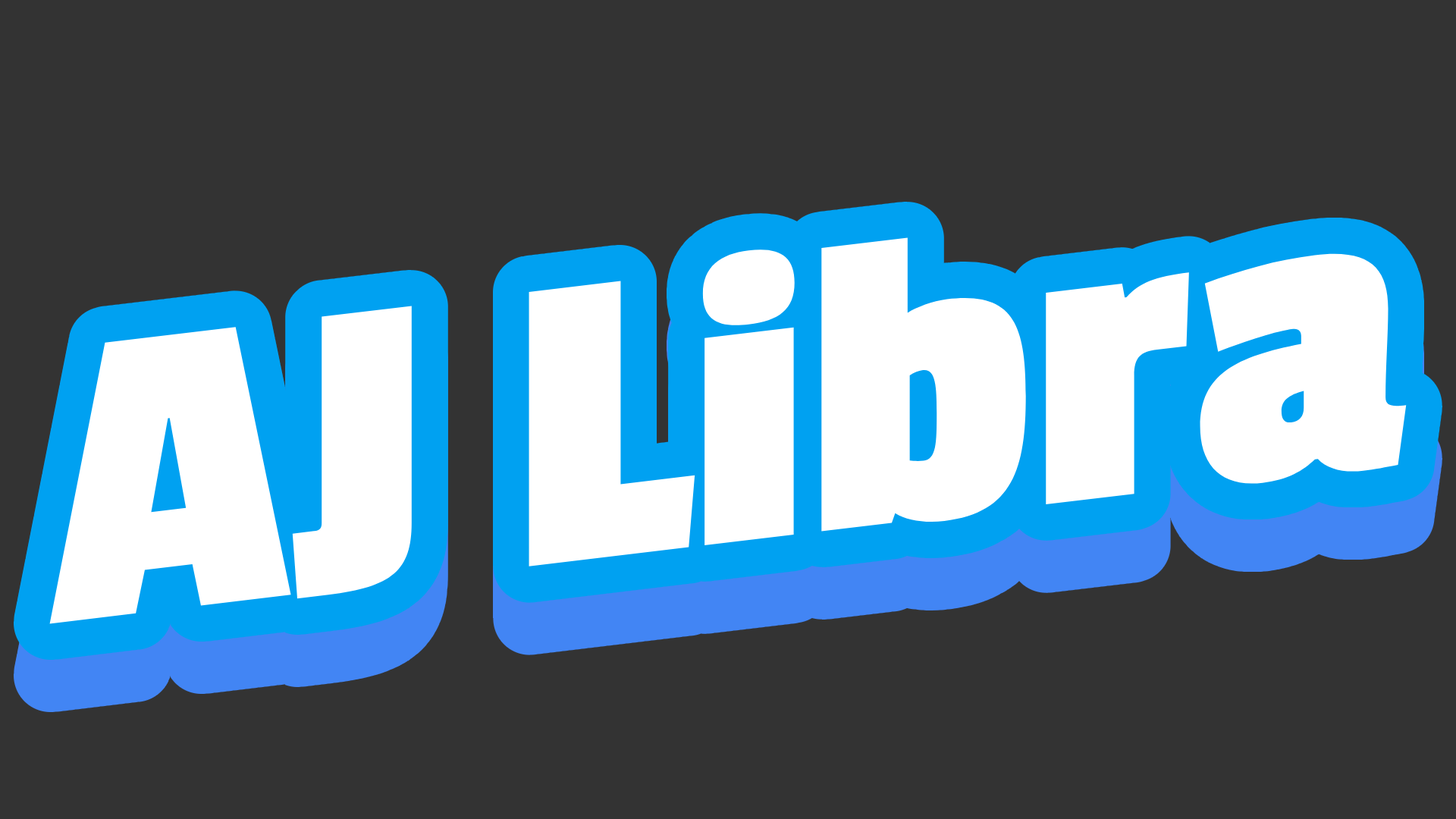
<style>
.page{position:relative;width:1456px;height:819px;background:#333333}
.page>*{position:absolute;margin:0}
.t1{font:441.9px "PassionOne-Bold";color:#ffffff}
</style>
<div class="page">
<p class="t1" style="left:49px;top:237px;width:1358px;height:387px;rotate:-7deg">AJ Libra</p>
</div>
